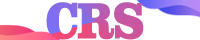
<style>
.page{position:relative;width:200px;height:40px;background:#ffffff}
.page>*{position:absolute;margin:0}
.t1{font:52px "ClarendonBT-Black";letter-spacing:-0.035em;scale:0.87 1}
</style>
<div class="page">
<p class="t1" style="left:46px;top:2px;width:98px;height:38px">CRS</p>
</div>
